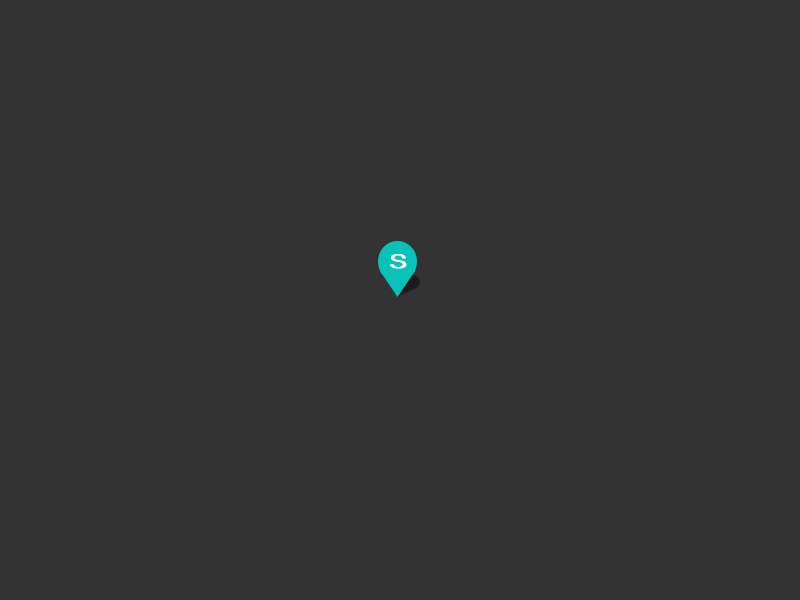
<style>
.page{position:relative;width:800px;height:600px;background:#333333}
.page>*{position:absolute;margin:0}
.t1{font:27.2px "Utsaah";color:#ffffff;font-weight:bold;scale:1.38 1}
</style>
<div class="page">
<p class="t1" style="left:390px;top:254px;width:17px;height:15px">S</p>
</div>
